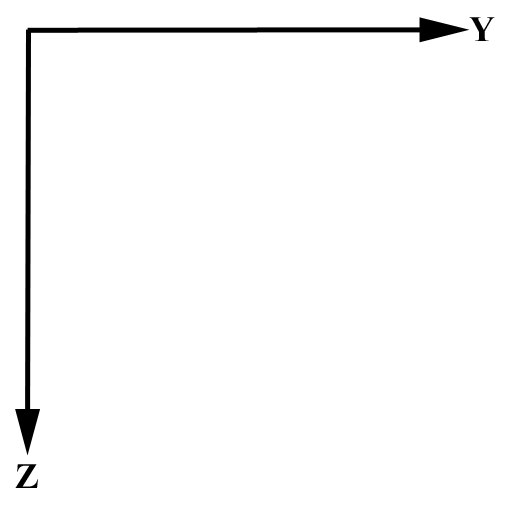
<style>
.page{position:relative;width:512px;height:512px;background:#ffffff}
.page>*{position:absolute;margin:0}
.t1{font:36px "TimesNewRomanPS-BoldMT";color:#000000}
</style>
<div class="page">
<p class="t1" style="left:469px;top:17px;width:26px;height:24px">Y</p>
<p class="t1" style="left:15px;top:464px;width:23px;height:24px">Z</p>
</div>
